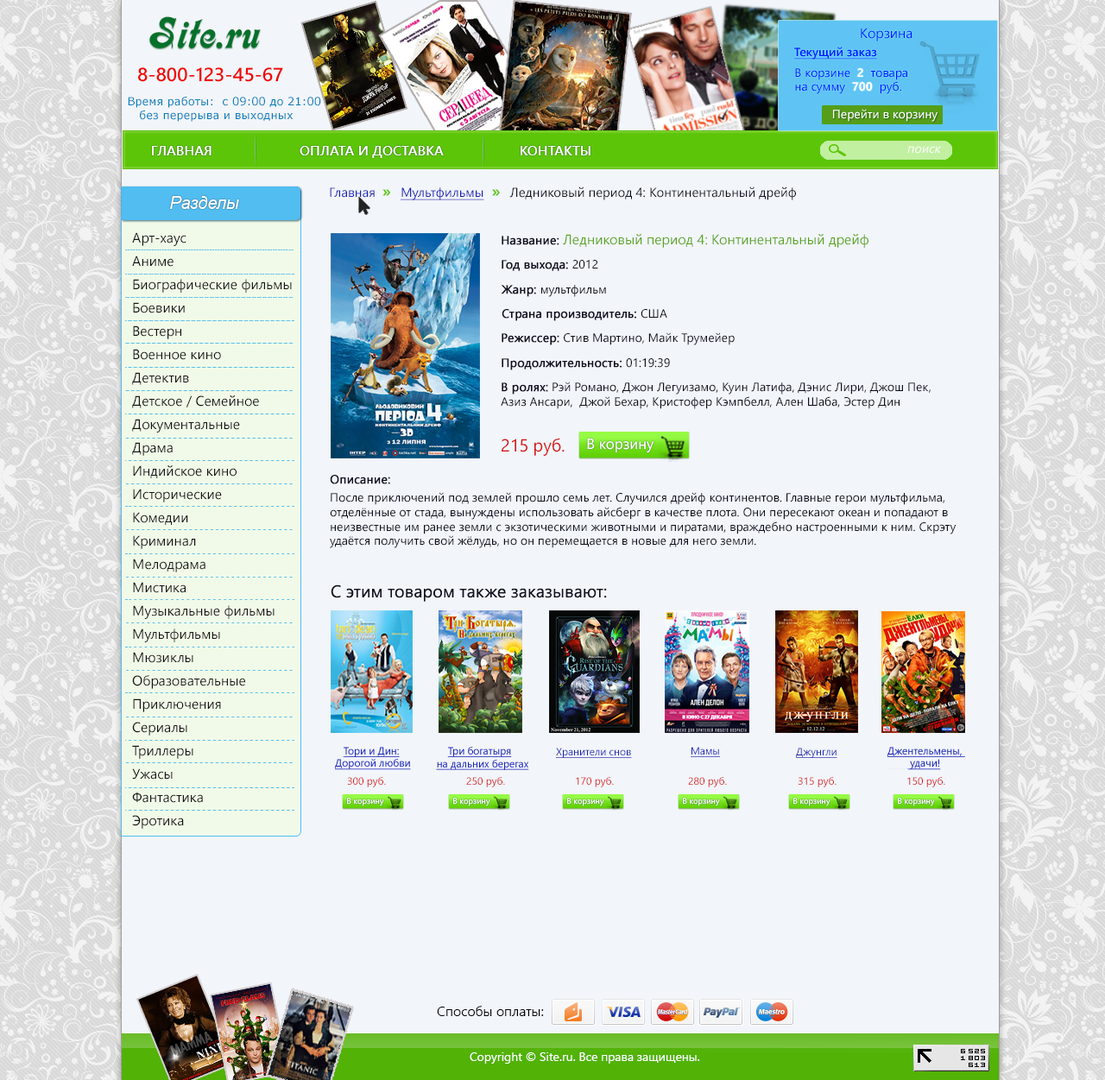
<style>
.page{position:relative;width:1105px;height:1080px;background:#f2f5fa}
.page>*{position:absolute;margin:0}
.t1{font:41.4px "Calligraph-Medium";color:#04712a}
.t2{font:13.8px "SegoeUI";color:#0119ff}
.t3{font:12.1px "SegoeUI-Semibold";color:#0018ff;text-decoration:underline}
.t4{font:19px "SegoeUI-Semibold";color:#ef0a05}
.t5{font:12.1px/13.8px "SegoeUI";color:#0018ff}
.t6{font:12.1px/13.8px "SegoeUI-Bold";color:#fbfbfd}
.t7{font:12.1px/13.8px "SegoeUI-Bold";color:#fefeff}
.t8{font:11.2px/13.8px "Verdana";color:#0480ba}
.t9{font:12.1px "SegoeUI";color:#ffffff}
.t10{font:13.8px "SegoeUI-Semibold";color:#ffffff}
.t11{font:12.4px "SegoeUI";color:#ffffff;font-style:italic}
.t12{font:17.3px "Arial-ItalicMT";color:#ffffff}
.t13{font:12.9px "SegoeUI";color:#0e0f1f}
.t14{font:12.9px "SegoeUI";color:#1722b4}
.t15{font:17.3px "SegoeUI";color:#5cc508;font-weight:bold}
.t16{font:12.9px "SegoeUI";color:#1722b4;text-decoration:underline}
.t17{font:13.8px/23.3px "SegoeUI";color:#131212}
.t18{font:13.8px "SegoeUI";color:#58a41b}
.t19{font:12.1px "SegoeUI";color:#0e0f1f;font-weight:bold}
.t20{font:11.8px "SegoeUI";color:#0e0f1f;font-weight:bold}
.t21{font:11.8px "SegoeUI";color:#0e0f1f}
.t22{font:12.1px "SegoeUI";color:#0e0f1f}
.t23{font:17.6px "SegoeUI";color:#d51616}
.t24{font:14.6px "SegoeUI";color:#ffffff}
.t25{font:17.3px "SegoeUI";color:#0e0f1f}
.t26{font:10.4px "SegoeUI";color:#1722b4;text-decoration:underline}
.t27{font:10.4px "SegoeUI";color:#d51616}
.t28{font:7.9px "SegoeUI";color:#ffffff}
.t29{font:13.8px "SegoeUI-Semilight";color:#000000}
</style>
<div class="page">
<p class="t1" style="left:149px;top:16px;width:112px;height:32px">Site.ru</p>
<p class="t2" style="left:860px;top:28px;width:52px;height:13px">Корзина</p>
<p class="t3" style="left:793px;top:47px;width:84px;height:13px">Текущий заказ</p>
<p class="t4" style="left:138px;top:67px;width:145px;height:15px">8-800-123-45-67</p>
<p class="t5" style="left:795px;top:68px;width:112px;height:26px;text-align:justify">В корзине  <span class="t6">2  </span>товара<br>на сумму  <span class="t7">700  </span>руб.</p>
<p class="t8" style="left:128px;top:97px;width:193px;height:25px;text-align:justify">Время работы:  с 09:00 до 21:00 <br>   без перерыва и выходных</p>
<p class="t9" style="left:833px;top:109px;width:104px;height:13px">Перейти в корзину</p>
<p class="t10" style="left:152px;top:146px;width:438px;height:12px">ГЛАВНАЯ                       ОПЛАТА И ДОСТАВКА                    КОНТАКТЫ</p>
<p class="t11" style="left:907px;top:146px;width:34px;height:8px">поиск</p>
<p class="t12" style="left:170px;top:196px;width:69px;height:13px">Разделы</p>
<p class="t13" style="left:330px;top:186px;width:466px;height:14px"><span class="t14">Главная  </span><span class="t15">»  </span><span class="t16">Мультфильмы  </span><span class="t15">»  </span>Ледниковый период 4: Континентальный дрейф</p>
<p class="t17" style="left:132px;top:232px;width:160px;height:596px;text-align:justify">Арт-хаус<br>Аниме<br>Биографические фильмы<br>Боевики<br>Вестерн<br>Военное кино<br>Детектив<br>Детское / Семейное<br>Документальные<br>Драма<br>Индийское кино<br>Исторические<br>Комедии<br>Криминал<br>Мелодрама<br>Мистика<br>Музыкальные фильмы<br>Мультфильмы<br>Мюзиклы<br>Образовательные<br>Приключения<br>Сериалы<br>Триллеры<br>Ужасы<br>Фантастика<br>Эротика</p>
<p class="t18" style="left:501px;top:234px;width:367px;height:14px"><span class="t19">Название: </span>Ледниковый период 4: Континентальный дрейф</p>
<p class="t20" style="left:501px;top:260px;width:97px;height:11px">Год выхода: <span class="t21">2012</span></p>
<p class="t22" style="left:501px;top:285px;width:105px;height:12px"><span class="t19">Жанр: </span>мультфильм</p>
<p class="t19" style="left:501px;top:309px;width:166px;height:12px">Страна производитель: <span class="t22">США</span></p>
<p class="t22" style="left:501px;top:332px;width:233px;height:13px"><span class="t19">Режиссер: </span>Стив Мартино, Майк Трумейер</p>
<p class="t19" style="left:501px;top:358px;width:169px;height:12px">Продолжительность: <span class="t22">01:19:39</span></p>
<p class="t22" style="left:501px;top:381px;width:429px;height:28px;text-align:justify"><span class="t19">В ролях:</span> Рэй Романо, Джон Легуизамо, Куин Латифа, Дэнис Лири, Джош Пек, <br>Азиз Ансари,  Джой Бехар, Кристофер Кэмпбелл, Ален Шаба, Эстер Дин</p>
<p class="t23" style="left:501px;top:438px;width:63px;height:18px">215 руб.</p>
<p class="t24" style="left:587px;top:438px;width:67px;height:15px">В корзину</p>
<p class="t19" style="left:330px;top:475px;width:60px;height:9px">Описание:</p>
<p class="t22" style="left:330px;top:492px;width:626px;height:56px;text-align:justify">После приключений под землей прошло семь лет. Случился дрейф континентов. Главные герои мультфильма, <br>отделённые от стада, вынуждены использовать айсберг в качестве плота. Они пересекают океан и попадают в <br>неизвестные им ранее земли с экзотическими животными и пиратами, враждебно настроенными к ним. Скрэту <br>удаётся получить свой жёлудь, но он перемещается в новые для него земли.</p>
<p class="t25" style="left:331px;top:584px;width:276px;height:17px">С этим товаром также заказывают:</p>
<p class="t26" style="left:556px;top:747px;width:76px;height:11px">Хранители снов</p>
<p class="t26" style="left:690px;top:746px;width:30px;height:11px">Мамы</p>
<p class="t26" style="left:796px;top:747px;width:41px;height:11px">Джунгли</p>
<p class="t27" style="left:347px;top:777px;width:39px;height:10px">300 руб.</p>
<p class="t27" style="left:466px;top:777px;width:39px;height:10px">250 руб.</p>
<p class="t27" style="left:576px;top:777px;width:38px;height:10px">170 руб.</p>
<p class="t27" style="left:688px;top:777px;width:39px;height:10px">280 руб.</p>
<p class="t27" style="left:797px;top:777px;width:39px;height:10px">315 руб.</p>
<p class="t27" style="left:907px;top:777px;width:38px;height:10px">150 руб.</p>
<p class="t28" style="left:347px;top:797px;width:37px;height:9px">В корзину</p>
<p class="t28" style="left:453px;top:797px;width:37px;height:9px">В корзину</p>
<p class="t28" style="left:567px;top:797px;width:37px;height:9px">В корзину</p>
<p class="t28" style="left:683px;top:797px;width:37px;height:9px">В корзину</p>
<p class="t28" style="left:793px;top:797px;width:37px;height:9px">В корзину</p>
<p class="t28" style="left:897px;top:797px;width:38px;height:9px">В корзину</p>
<p class="t29" style="left:437px;top:1005px;width:107px;height:11px">Способы оплаты:</p>
<p class="t9" style="left:469px;top:1052px;width:231px;height:11px">Copyright © Site.ru. Все права защищены.</p>
</div>
